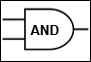
<style>
.page{position:relative;width:91px;height:62px;background:#ffffff}
.page>*{position:absolute;margin:0}
.t1{font:13.3px "Arial-BoldMT";color:#000000}
</style>
<div class="page">
<p class="t1" style="left:30px;top:25px;width:29px;height:10px">AND</p>
</div>
